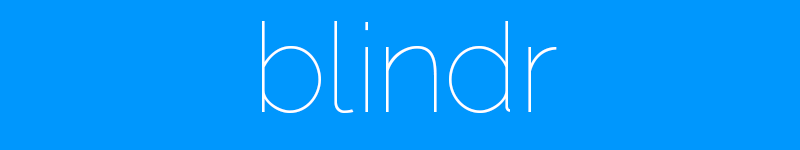
<style>
.page{position:relative;width:800px;height:150px;background:#0097fd}
.page>*{position:absolute;margin:0}
.t1{font:125px "Raleway-Thin";color:#ffffff}
</style>
<div class="page">
<p class="t1" style="left:262px;top:21px;width:295px;height:92px">blindr</p>
</div>
